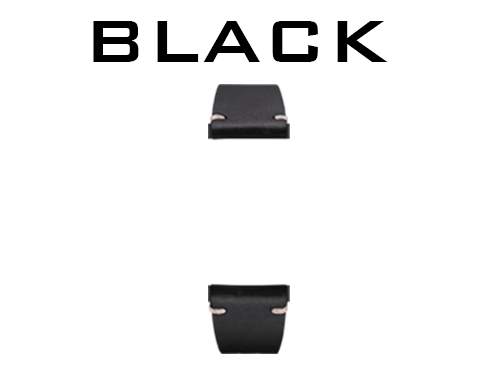
<style>
.page{position:relative;width:480px;height:380px;background:#ffffff}
.page>*{position:absolute;margin:0}
.t1{font:80px "BankGothicBT-Medium";color:#000000}
</style>
<div class="page">
<p class="t1" style="left:93px;top:21px;width:295px;height:41px">BLACK</p>
</div>
